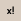
<style>
.page{position:relative;width:21px;height:21px;background:#d9cdc1}
.page>*{position:absolute;margin:0}
.t1{font:9px "Tahoma";color:#000000}
.t2{font:10px "Tahoma";color:#000000}
</style>
<div class="page">
<p class="t1" style="left:7px;top:6px;width:7px;height:8px">x<span class="t2">!</span></p>
</div>
